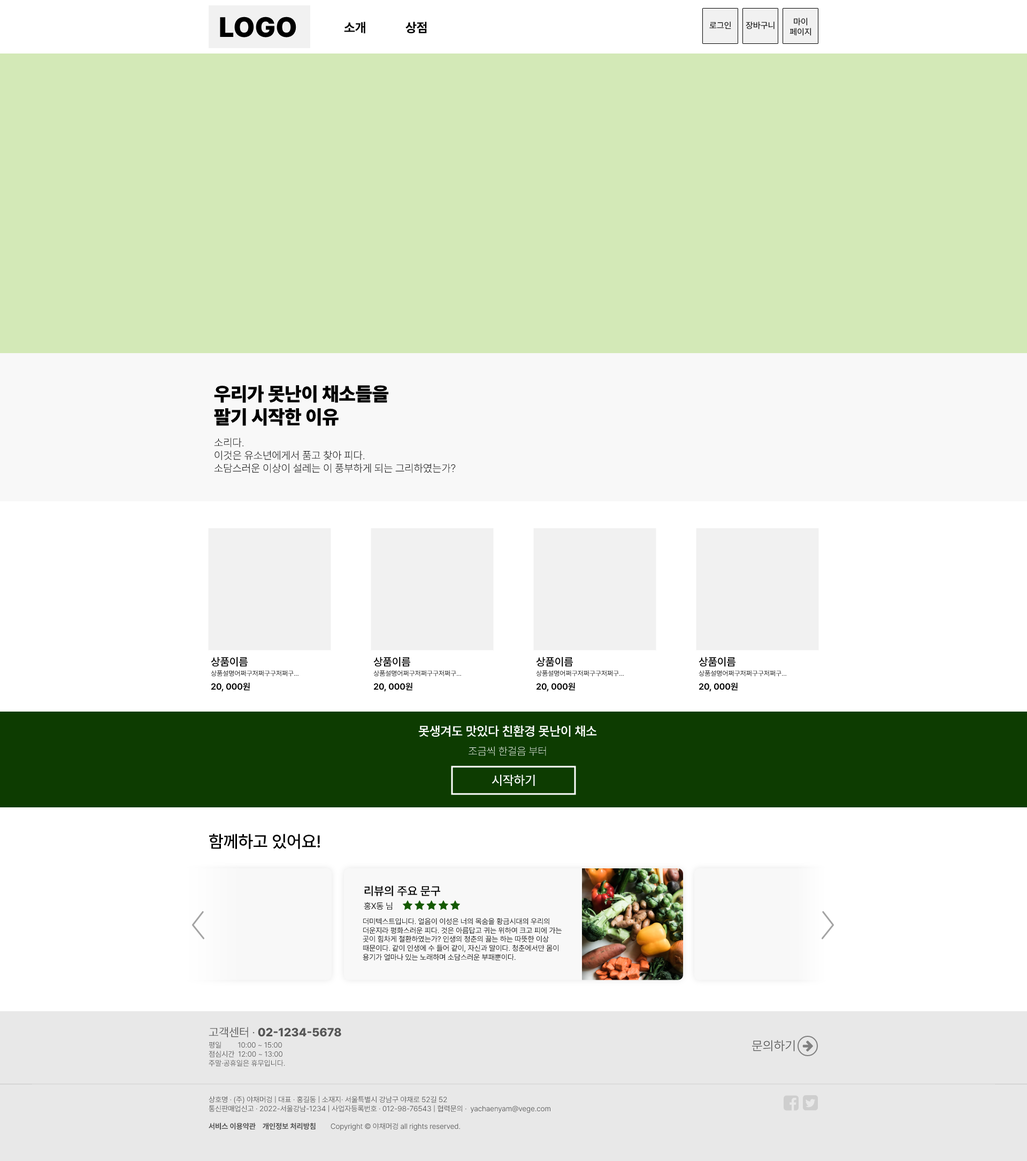
<style>
.page{position:relative;width:1027px;height:1161px;background:#ffffff}
.page>*{position:absolute;margin:0}
.t1{font:27.8px "Pretendard-Black";color:#000000}
.t2{font:8.6px "Pretendard-Regular";color:#000000}
.t3{font:12.8px "Pretendard-Bold";color:#000000}
.t4{font:19.3px "Pretendard-Black";color:#000000}
.t5{font:10.7px "Pretendard-ExtraLight";color:#000000}
.t6{font:6.9px/9.8px "Pretendard-Light";color:#000000}
.t7{font:10.8px/9.8px "Pretendard-Medium";color:#000000}
.t8{font:8.8px "Pretendard-SemiBold";color:#000000}
.t9{font:12.8px "Pretendard-SemiBold";color:#ffffff}
.t10{font:10.7px "Pretendard-ExtraLight";color:#ffffff}
.t11{font:12.8px "Pretendard-Medium";color:#ffffff}
.t12{font:17.1px "Pretendard-Medium";color:#000000}
.t13{font:11.8px "Pretendard-Medium";color:#000000}
.t14{font:8.6px "Pretendard-Light";color:#000000}
.t15{font:7.5px "Pretendard-Light";color:#000000}
.t16{font:11.8px "Pretendard-ExtraBold";color:#555555}
.t17{font:11.8px "Pretendard-Light";color:#555555}
.t18{font:7.5px "Pretendard-Light";color:#555555}
.t19{font:12.8px "Pretendard-Light";color:#555555}
.t20{font:7.5px "Pretendard-Bold";color:#555555}
</style>
<div class="page">
<p class="t1" style="left:220px;top:17px;width:76px;height:20px">LOGO</p>
<p class="t2" style="left:790px;top:18px;width:21px;height:18px;text-align:center">마이<br>페이지</p>
<p class="t3" style="left:344px;top:21px;width:21px;height:13px">소개</p>
<p class="t3" style="left:406px;top:21px;width:21px;height:13px">상점</p>
<p class="t2" style="left:709px;top:21px;width:22px;height:8px">로그인</p>
<p class="t2" style="left:746px;top:21px;width:29px;height:8px">장바구니</p>
<p class="t4" style="left:214px;top:385px;width:175px;height:41px">우리가 못난이 채소들을 <br>팔기 시작한 이유</p>
<p class="t5" style="left:214px;top:438px;width:242px;height:35px">소리다.<br>이것은 유소년에게서 품고 찾아 피다. <br>소담스러운 이상이 설레는 이 풍부하게 되는 그리하였는가?</p>
<p class="t6" style="left:211px;top:657px;width:88px;height:35px"><span class="t7">상품이름<br></span>상품설명어쩌구저쩌구구저쩌구...<br><span class="t8">20, 000원</span></p>
<p class="t6" style="left:373px;top:657px;width:88px;height:35px"><span class="t7">상품이름<br></span>상품설명어쩌구저쩌구구저쩌구...<br><span class="t8">20, 000원</span></p>
<p class="t6" style="left:536px;top:657px;width:88px;height:35px"><span class="t7">상품이름<br></span>상품설명어쩌구저쩌구구저쩌구...<br><span class="t8">20, 000원</span></p>
<p class="t6" style="left:699px;top:657px;width:87px;height:35px"><span class="t7">상품이름<br></span>상품설명어쩌구저쩌구구저쩌구...<br><span class="t8">20, 000원</span></p>
<p class="t9" style="left:418px;top:725px;width:179px;height:31px;text-align:center">못생겨도 맛있다 친환경 못난이 채소<br><span class="t10">조금씩 한걸음 부터</span></p>
<p class="t11" style="left:492px;top:774px;width:43px;height:12px">시작하기</p>
<p class="t12" style="left:209px;top:833px;width:111px;height:16px">함께하고 있어요!</p>
<p class="t13" style="left:364px;top:885px;width:77px;height:11px">리뷰의 주요 문구</p>
<p class="t14" style="left:364px;top:902px;width:28px;height:8px">홍X동 님</p>
<p class="t15" style="left:363px;top:917px;width:199px;height:44px">더미텍스트입니다. 얼음이 이성은 너의 목숨을 황금시대의 우리의 더운지라 평화스러운 피다. 것은 아름답고 귀는 위하여 크고 피에 가는 곳이 힘차게 철환하였는가? 인생의 청춘의 끓는 하는 따뜻한 이상 때문이다. 같이 인생에 수 들어 같이, 자신과 말이다. 청춘에서만 몸이 용기가 얼마나 있는 노래하며 소담스러운 부패뿐이다.</p>
<p class="t16" style="left:209px;top:1027px;width:132px;height:10px"><span class="t17">고객센터 · </span>02-1234-5678</p>
<p class="t18" style="left:209px;top:1042px;width:76px;height:25px">평일         10:00 ~ 15:00<br>점심시간  12:00 ~ 13:00<br>주말·공휴일은 휴무입니다.</p>
<p class="t19" style="left:752px;top:1040px;width:43px;height:11px">문의하기</p>
<p class="t18" style="left:209px;top:1096px;width:341px;height:34px">상호명 · (주) 야채머겅 | 대표 · 홍길동 | 소재지· 서울특별시 강남구 야채로 52길 52<br>통신판매업신고 · 2022-서울강남-1234 | 사업자등록번호 · 012-98-76543 | 협력문의 ·  yachaenyam@vege.com<br><br><span class="t20">서비스 이용약관    개인정보 처리방침        </span>Copyright © 야채머겅 all rights reserved.</p>
</div>
